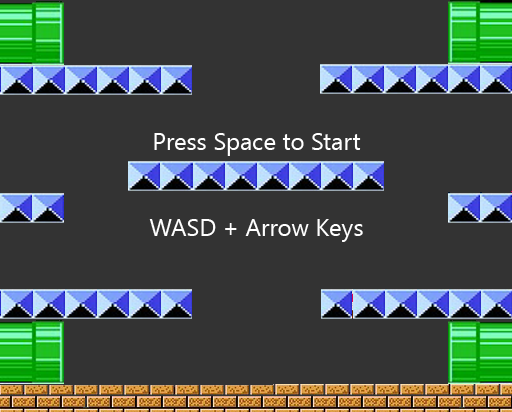
<style>
.page{position:relative;width:512px;height:412px;background:#333333}
.page>*{position:absolute;margin:0}
.t1{font:24px "SegoeUISymbol";color:#ffffff}
</style>
<div class="page">
<p class="t1" style="left:149px;top:133px;width:214px;height:109px;text-align:center">Press Space to Start<br><br><br>WASD + Arrow Keys</p>
</div>
